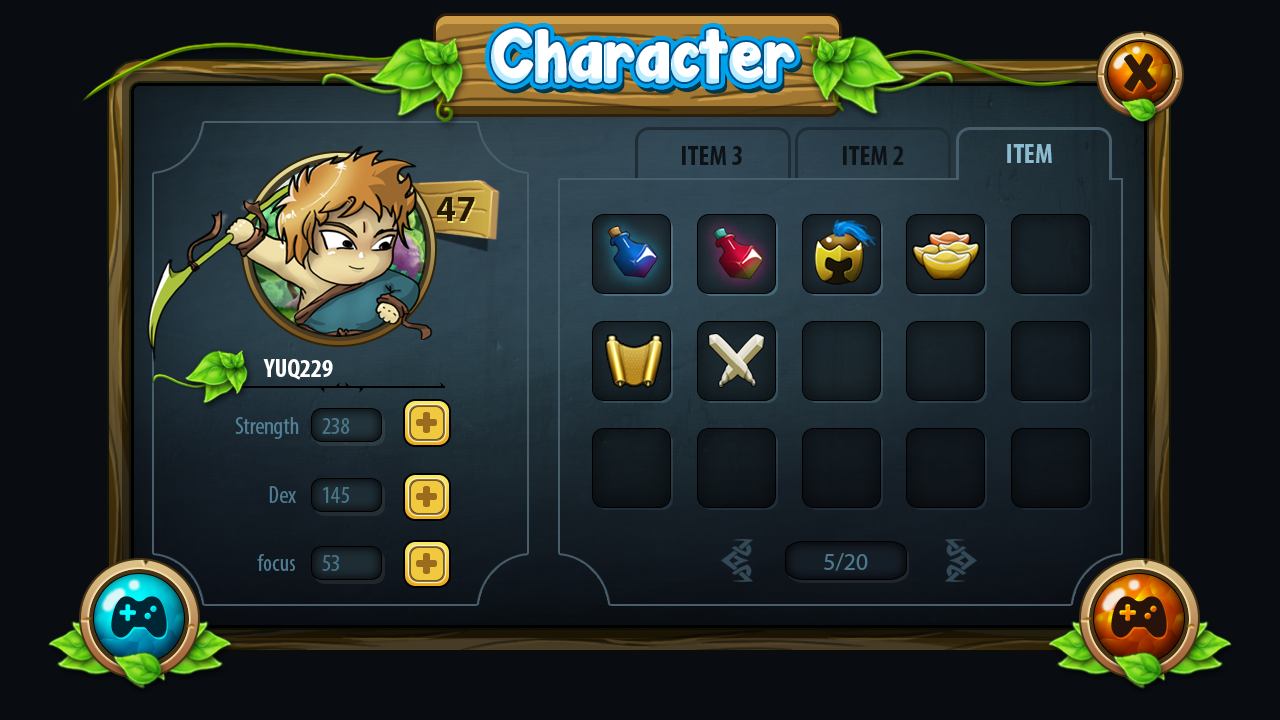
<style>
.page{position:relative;width:1280px;height:720px;background:#090d12}
.page>*{position:absolute;margin:0}
.t1{font:67.7px "JandaManateeSolid";color:#ffffff}
.t2{font:46.1px "JandaManateeSolid";color:#31190a}
.t3{font:28px "MyriadPro-BoldCond";color:#0c1215;text-transform:uppercase}
.t4{font:28px "MyriadPro-BoldCond";color:#8abbd1;text-transform:uppercase}
.t5{font:36px "MyriadPro-Bold";color:#251905}
.t6{font:26px "MyriadPro-BoldCond";color:#ffffff;text-transform:uppercase}
.t7{font:24px "MyriadPro-Cond";color:#528297}
.t8{font:24px "MyriadPro-Cond";color:#4c798d}
.t9{font:24px "MyriadPro-Cond";color:#4f7d92}
.t10{font:24px "MyriadPro-Cond";color:#4c788d}
.t11{font:24px "MyriadPro-Cond";color:#497387}
.t12{font:24px "MyriadPro-Regular";color:#4c798d}
</style>
<div class="page">
<p class="t1" style="left:491px;top:28px;width:304px;height:56px">Character</p>
<p class="t2" style="left:1124px;top:53px;width:33px;height:39px">X</p>
<p class="t3" style="left:682px;top:146px;width:60px;height:19px">iTEM 3</p>
<p class="t3" style="left:843px;top:146px;width:61px;height:19px">Item 2</p>
<p class="t4" style="left:1007px;top:144px;width:45px;height:19px">Item</p>
<p class="t5" style="left:436px;top:197px;width:39px;height:24px">47</p>
<p class="t6" style="left:263px;top:359px;width:70px;height:21px">Yuq229</p>
<p class="t7" style="left:235px;top:417px;width:64px;height:22px">Strength</p>
<p class="t8" style="left:322px;top:418px;width:28px;height:16px">238</p>
<p class="t9" style="left:269px;top:486px;width:27px;height:17px">Dex</p>
<p class="t10" style="left:323px;top:487px;width:26px;height:16px">145</p>
<p class="t9" style="left:257px;top:554px;width:38px;height:17px">focus</p>
<p class="t11" style="left:322px;top:555px;width:17px;height:16px">53</p>
<p class="t12" style="left:824px;top:553px;width:44px;height:18px">5/20</p>
</div>
